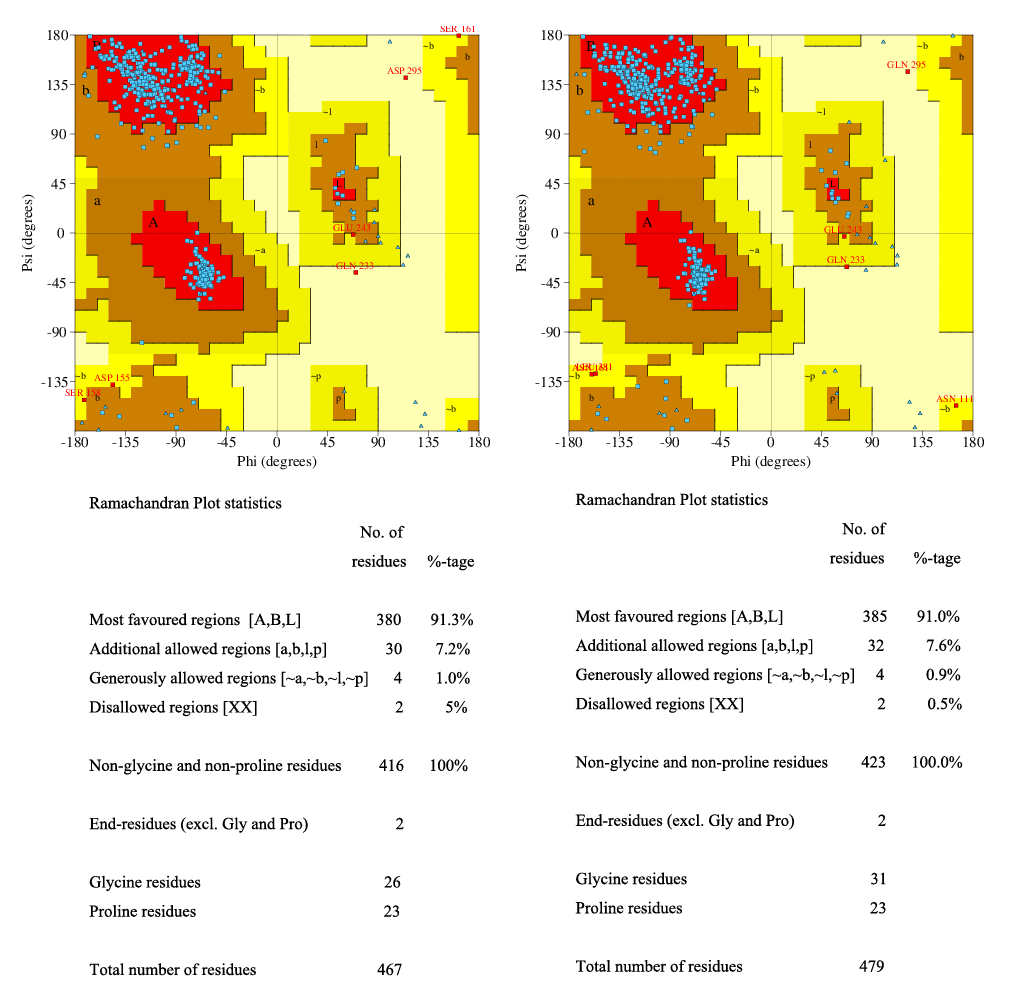
<style>
.page{position:relative;width:1014px;height:1000px;background:#ffffff}
.page>*{position:absolute;margin:0}
.t1{font:16.7px "TimesNewRomanPSMT";color:#000000}
</style>
<div class="page">
<p class="t1" style="left:89px;top:496px;width:386px;height:480px">Ramachandran Plot statistics<br>                                                                 No. of<br>                                                               residues     %-tage<br><br>Most favoured regions  [A,B,L]                  380       91.3%          <br>Additional allowed regions [a,b,l,p]              30        7.2%          <br>Generously allowed regions [~a,~b,~l,~p]      4        1.0%          <br>Disallowed regions [XX]                                 2          5%  <br><br>Non-glycine and non-proline residues         416      100%<br><br>End-residues (excl. Gly and Pro)                     2<br><br>Glycine residues                                            26<br>Proline residues                                             23<br><br>Total number of residues                             467</p>
<p class="t1" style="left:575px;top:493px;width:388px;height:479px">Ramachandran Plot statistics<br>                                                                No. of<br>                                                             residues       %-tage<br><br>Most favoured regions [A,B,L]                   385       91.0%          <br>Additional allowed regions [a,b,l,p]             32          7.6%          <br>Generously allowed regions [~a,~b,~l,~p]     4          0.9%          <br>Disallowed regions [XX]                                2          0.5%  <br><br>Non-glycine and non-proline residues        423      100.0%<br><br>End-residues (excl. Gly and Pro)                    2<br><br>Glycine residues                                            31<br>Proline residues                                             23<br><br>Total number of residues                            479</p>
</div>
